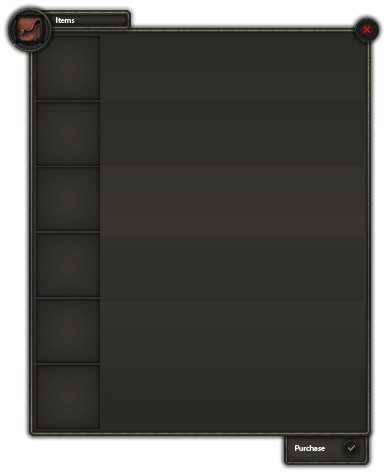
<style>
.page{position:relative;width:387px;height:474px}
.page>*{position:absolute;margin:0}
.t1{font:8px "MyriadPro-Regular";color:#fefefe}
.t2{font:8px "MyriadPro-Regular";color:#fcfcfb}
</style>
<div class="page">
<p class="t1" style="left:56px;top:17px;width:19px;height:6px">Items</p>
<p class="t2" style="left:295px;top:445px;width:30px;height:6px">Purchase</p>
</div>
